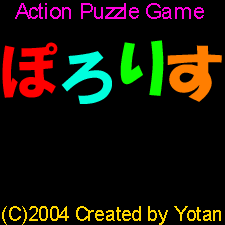
<style>
.page{position:relative;width:225px;height:225px;background:#000000}
.page>*{position:absolute;margin:0}
.t1{font:21.1px "ArialMT";color:#ff00de}
.t2{font:63.3px "HGSoeiKakupoptai";color:#0cff00}
.t3{font:63.3px "HGSoeiKakugothicUB";color:#ff0000}
.t4{font:63.3px "HGSoeiKakugothicUB";color:#00ffde}
.t5{font:63.3px "HGSoeiKakupoptai";color:#ff7e00}
.t6{font:19.3px "ArialMT";color:#ffd800}
</style>
<div class="page">
<p class="t1" style="left:15px;top:3px;width:189px;height:16px">Action Puzzle Game</p>
<p class="t2" style="left:120px;top:40px;width:44px;height:56px">り</p>
<p class="t3" style="left:2px;top:42px;width:56px;height:56px">ぽ</p>
<p class="t4" style="left:61px;top:51px;width:51px;height:53px">ろ</p>
<p class="t5" style="left:167px;top:45px;width:55px;height:57px">す</p>
<p class="t6" style="left:2px;top:206px;width:219px;height:19px">(C)2004 Created by Yotan</p>
</div>
